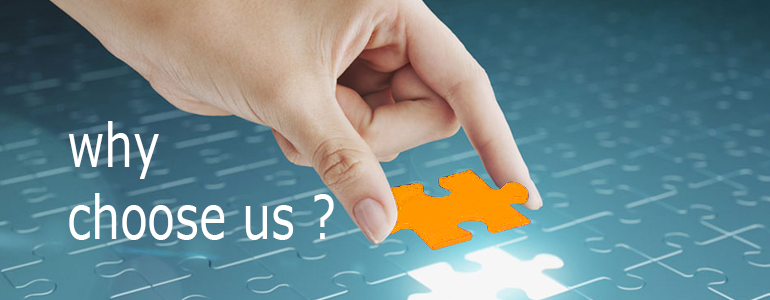
<style>
.page{position:relative;width:770px;height:300px}
.page>*{position:absolute;margin:0}
.t1{font:60px "Verdana";color:#ffffff;scale:0.76 1}
</style>
<div class="page">
<p class="t1" style="left:69px;top:121px;width:265px;height:119px">why <br>choose us ?</p>
</div>
